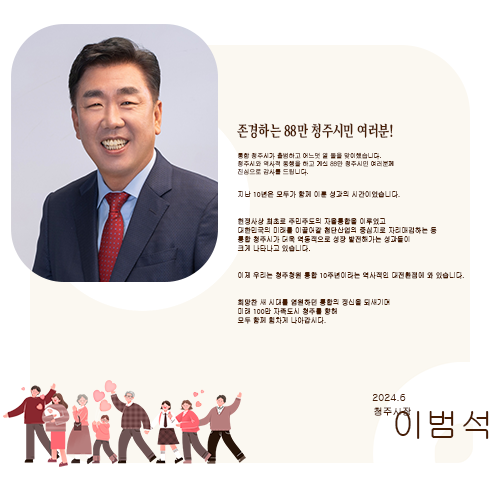
<style>
.page{position:relative;width:500px;height:500px;background:#fbf8f1}
.page>*{position:absolute;margin:0}
.t1{font:15.4px "Arita-buri-Bold_OTF";color:#471d04;scale:0.74 1}
.t2{font:6.4px "New-Gulim";color:#471d04;scale:0.92 1}
.t3{font:7.5px "New-Gulim";color:#471d04;scale:0.89 1}
.t4{font:10.4px "New-Gulim";color:#471d04}
.t5{font:9.6px "New-Gulim";color:#471d04}
.t6{font:34.5px "New-Gulim";color:#471d04}
</style>
<div class="page">
<p class="t1" style="left:237px;top:123px;width:156px;height:16px">존경하는 88만 청주시민 여러분!</p>
<p class="t2" style="left:237px;top:152px;width:157px;height:24px">통합 청주시가 출범하고 어느덧 열 돌을 맞이했습니다.<br>청주시와 역사적 동행을 하고 계신 88만 청주시민 여러분께<br>진심으로 감사를 드립니다.</p>
<p class="t3" style="left:237px;top:191px;width:227px;height:133px">지난 10년은 모두가 함께 이룬 성과의 시간이었습니다.<br><br><br>헌정사상 최초로 주민주도의 자율통합을 이루었고<br>대한민국의 미래를 이끌어갈 첨단산업의 중심지로 자리매김하는 등<br>통합 청주시가 더욱 역동적으로 성장 발전해가는 성과들이<br>크게 나타나고 있습니다.<br><br><br>이제 우리는 청주청원 통합 10주년이라는 역사적인 대전환점에 와 있습니다.<br><br><br>희망찬 새 시대를 염원하던 통합의 정신을 되새기며<br>미래 100만 자족도시 청주를 향해<br>모두 함께 힘차게 나아갑시다.</p>
<p class="t4" style="left:372px;top:394px;width:34px;height:7px">2024.6</p>
<p class="t5" style="left:374px;top:407px;width:37px;height:9px">청주시장</p>
<p class="t6" style="left:395px;top:411px;width:94px;height:28px">이범석</p>
</div>
